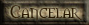
<style>
.page{position:relative;width:89px;height:25px}
.page>*{position:absolute;margin:0}
.t1{font:17px "Morpheus";color:#2c1a02}
</style>
<div class="page">
<p class="t1" style="left:10px;top:5px;width:73px;height:16px">Cancelar</p>
</div>
